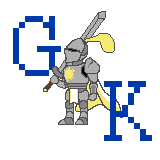
<style>
.page{position:relative;width:160px;height:160px;background:#ffffff}
.page>*{position:absolute;margin:0}
.t1{font:96px "Courier";color:#0039ac}
</style>
<div class="page">
<p class="t1" style="left:13px;top:16px;width:48px;height:60px">G</p>
<p class="t1" style="left:104px;top:81px;width:48px;height:60px">K</p>
</div>
